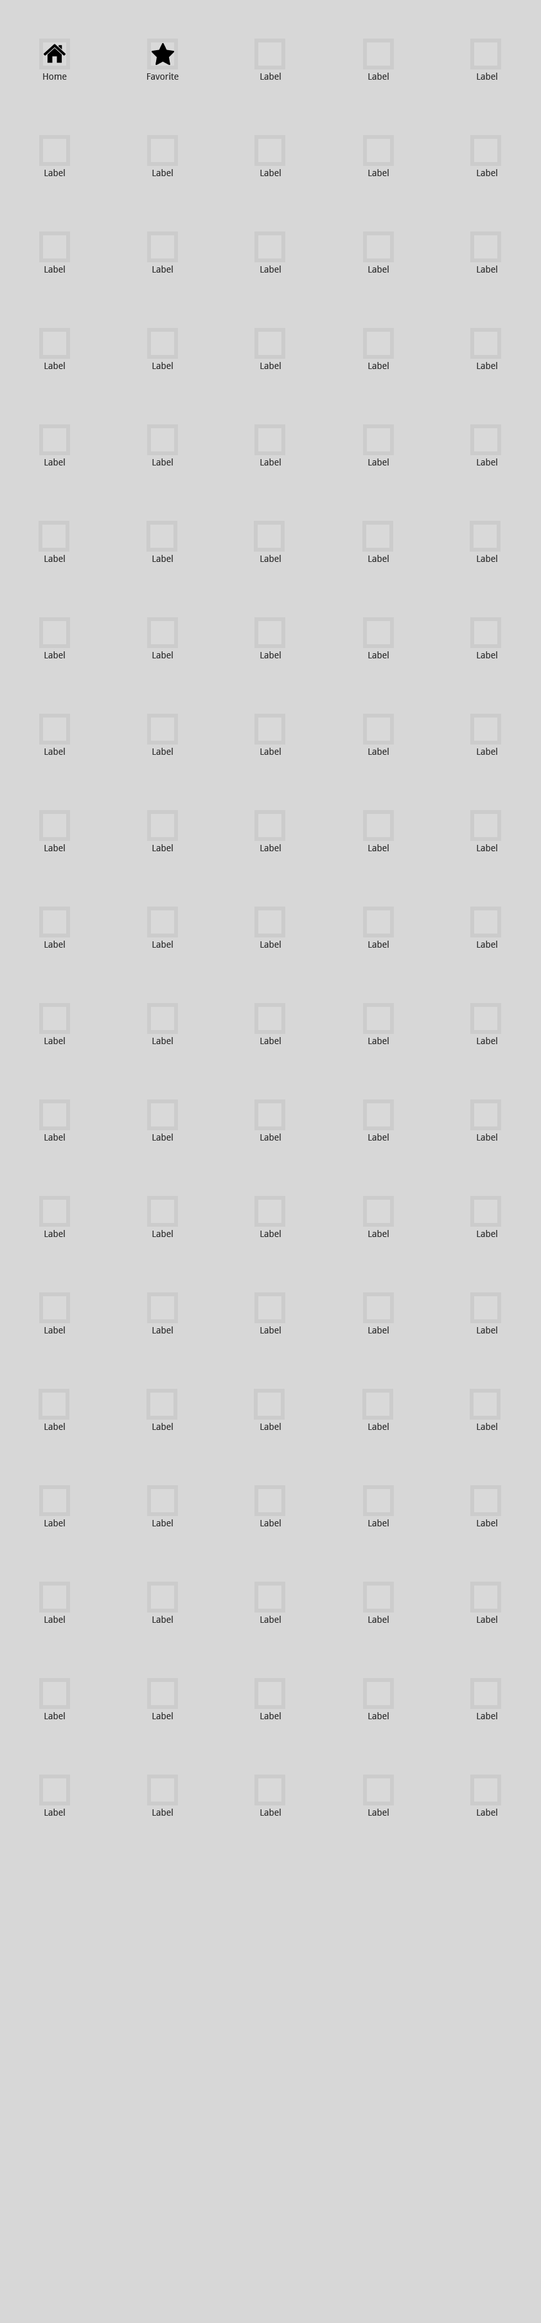
<style>
.page{position:relative;width:541px;height:2323px;background:#d7d7d7}
.page>*{position:absolute;margin:0}
.t1{font:9px/96.4px "DroidSans";color:#323232}
</style>
<div class="page">
<p class="t1" style="left:43px;top:73px;width:24px;height:1742px;text-align:center">Home<br>Label<br>Label<br>Label<br>Label<br>Label<br>Label<br>Label<br>Label<br>Label<br>Label<br>Label<br>Label<br>Label<br>Label<br>Label<br>Label<br>Label<br>Label</p>
<p class="t1" style="left:147px;top:73px;width:32px;height:1742px;text-align:center">Favorite<br>Label<br>Label<br>Label<br>Label<br>Label<br>Label<br>Label<br>Label<br>Label<br>Label<br>Label<br>Label<br>Label<br>Label<br>Label<br>Label<br>Label<br>Label</p>
<p class="t1" style="left:260px;top:73px;width:21px;height:1742px;text-align:center">Label<br>Label<br>Label<br>Label<br>Label<br>Label<br>Label<br>Label<br>Label<br>Label<br>Label<br>Label<br>Label<br>Label<br>Label<br>Label<br>Label<br>Label<br>Label</p>
<p class="t1" style="left:368px;top:73px;width:21px;height:1742px;text-align:center">Label<br>Label<br>Label<br>Label<br>Label<br>Label<br>Label<br>Label<br>Label<br>Label<br>Label<br>Label<br>Label<br>Label<br>Label<br>Label<br>Label<br>Label<br>Label</p>
<p class="t1" style="left:477px;top:73px;width:21px;height:1742px;text-align:center">Label<br>Label<br>Label<br>Label<br>Label<br>Label<br>Label<br>Label<br>Label<br>Label<br>Label<br>Label<br>Label<br>Label<br>Label<br>Label<br>Label<br>Label<br>Label</p>
</div>
